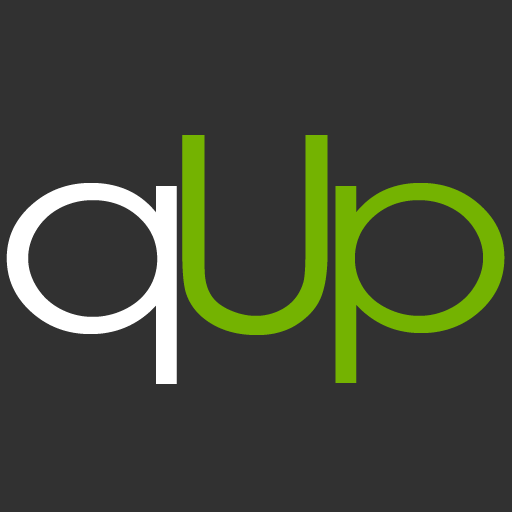
<style>
.page{position:relative;width:512px;height:512px;background:#313131}
.page>*{position:absolute;margin:0}
.t1{font:271.5px "CenturyGothic";letter-spacing:-0.14em;color:#74b301;scale:1.12 1}
.t2{font:273px "CenturyGothic";color:#ffffff;scale:1.12 1}
</style>
<div class="page">
<p class="t1" style="left:182px;top:135px;width:323px;height:248px">Up</p>
<p class="t2" style="left:6px;top:183px;width:171px;height:201px">q</p>
</div>
